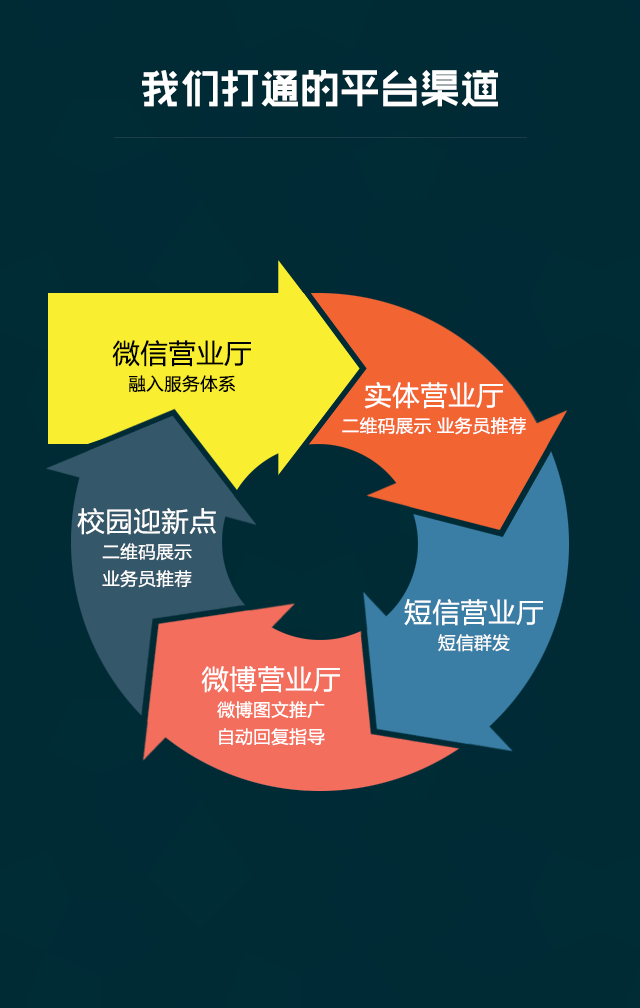
<style>
.page{position:relative;width:640px;height:1008px;background:#002b35}
.page>*{position:absolute;margin:0}
.t1{font:40px "RTWSShangGoG0v1-Bold";color:#ffffff}
.t2{font:18px/27px "FZLTHK--GBK1-0";color:#000000}
.t3{font:28px/27px "FZLTHK--GBK1-0";color:#000000}
.t4{font:18px/27px "FZLTHK--GBK1-0";color:#ffffff}
.t5{font:28px/27px "FZLTHK--GBK1-0";color:#ffffff}
</style>
<div class="page">
<p class="t1" style="left:142px;top:70px;width:356px;height:37px">我们打通的平台渠道</p>
<p class="t2" style="left:112px;top:340px;width:139px;height:53px;text-align:center"><span class="t3">微信营业厅<br></span>融入服务体系</p>
<p class="t4" style="left:342px;top:382px;width:184px;height:53px;text-align:center"><span class="t5">实体营业厅<br></span>二维码展示 业务员推荐</p>
<p class="t4" style="left:77px;top:508px;width:139px;height:80px;text-align:center"><span class="t5">校园迎新点<br></span>二维码展示<br>业务员推荐</p>
<p class="t5" style="left:404px;top:599px;width:139px;height:53px;text-align:center">短信营业厅<br><span class="t4">短信群发</span></p>
<p class="t4" style="left:201px;top:666px;width:139px;height:80px;text-align:center"><span class="t5">微博营业厅<br></span>微博图文推广<br>自动回复指导</p>
</div>
